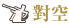
<style>
.page{position:relative;width:69px;height:27px;background:#ffffff}
.page>*{position:absolute;margin:0}
.t1{font:18px "RyuminPr6N-ExBold";color:#ae9442}
</style>
<div class="page">
<p class="t1" style="left:33px;top:4px;width:35px;height:18px">對空</p>
</div>
